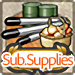
<style>
.page{position:relative;width:75px;height:75px}
.page>*{position:absolute;margin:0}
.t1{font:16px "AdobeClean-Regular";letter-spacing:-0.08em;color:#ff5a00}
</style>
<div class="page">
<p class="t1" style="left:2px;top:53px;width:72px;height:16px">Sub.Supplies</p>
</div>
